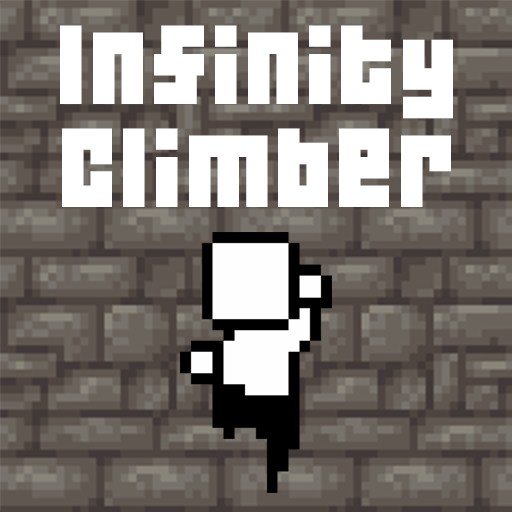
<style>
.page{position:relative;width:512px;height:512px}
.page>*{position:absolute;margin:0}
.t1{font:100px/103px "04b19";letter-spacing:0.04em;color:#ffffff}
</style>
<div class="page">
<p class="t1" style="left:60px;top:25px;width:393px;height:182px;text-align:center">Infinity<br>Climber</p>
</div>
